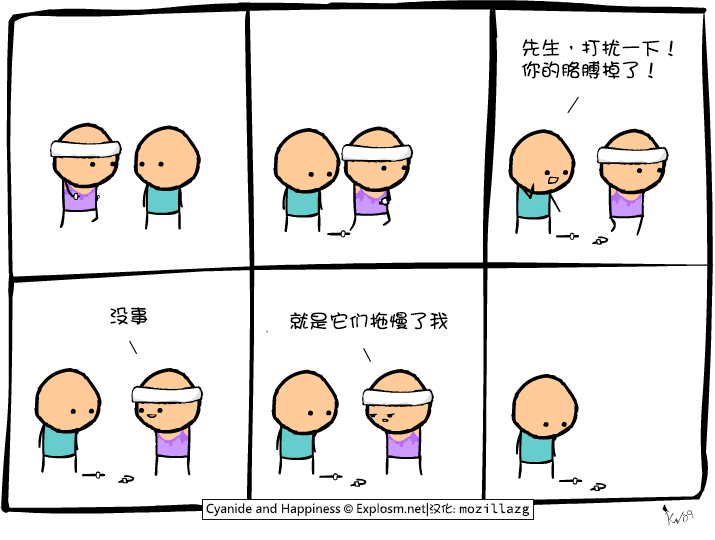
<style>
.page{position:relative;width:715px;height:540px;background:#ffffff}
.page>*{position:absolute;margin:0}
.t1{font:20px/22px "DFGirl";color:#000000}
.t2{font:20px "DFGirl";color:#000000}
</style>
<div class="page">
<p class="t1" style="left:521px;top:38px;width:152px;height:41px">先生，打扰一下！<br>你的胳膊掉了！</p>
<p class="t2" style="left:110px;top:307px;width:38px;height:18px">没事</p>
<p class="t2" style="left:290px;top:312px;width:158px;height:18px">就是它们拖慢了我</p>
</div>
